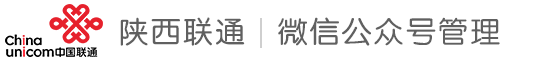
<style>
.page{position:relative;width:540px;height:60px;background:#ffffff}
.page>*{position:absolute;margin:0}
.t1{font:29.6px "FZY3JW--GB1-0";letter-spacing:0.083em;color:#606060}
</style>
<div class="page">
<p class="t1" style="left:120px;top:17px;width:125px;height:29px">陕西联通</p>
<p class="t1" style="left:278px;top:17px;width:222px;height:29px">微信公众号管理</p>
</div>
